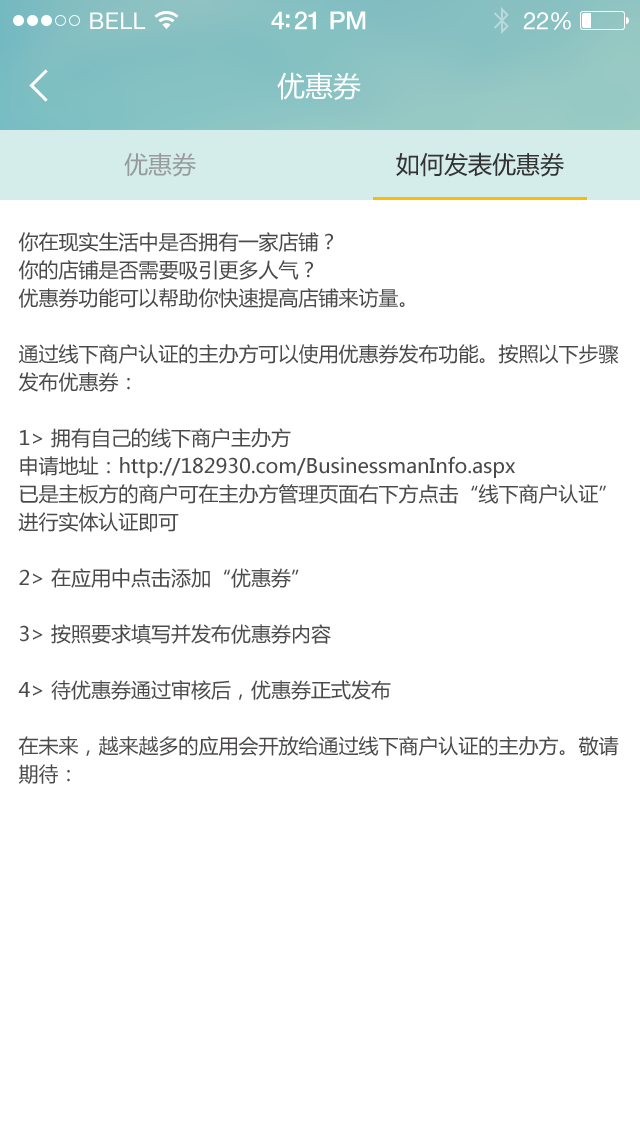
<style>
.page{position:relative;width:640px;height:1136px;background:#ffffff}
.page>*{position:absolute;margin:0}
.t1{font:23px "HelveticaNeue";letter-spacing:0.02em;color:#ffffff}
.t2{font:25px "HelveticaNeue-Medium";letter-spacing:-0.02em;color:#ffffff}
.t3{font:24px "HelveticaNeue";letter-spacing:-0.02em;color:#ffffff}
.t4{font:28px "MicrosoftYaHei";color:#ffffff}
.t5{font:24px "MicrosoftYaHei";color:#979b9d}
.t6{font:24px "MicrosoftYaHei";color:#333333}
.t7{font:20px/28px "MicrosoftYaHei";color:#4b4949}
</style>
<div class="page">
<p class="t1" style="left:90px;top:12px;width:56px;height:17px">BELL</p>
<p class="t2" style="left:271px;top:11px;width:95px;height:19px">4:21 PM</p>
<p class="t3" style="left:523px;top:12px;width:48px;height:18px">22%</p>
<p class="t4" style="left:277px;top:72px;width:84px;height:28px">优惠券</p>
<p class="t5" style="left:124px;top:153px;width:72px;height:24px">优惠券</p>
<p class="t6" style="left:396px;top:152px;width:168px;height:25px">如何发表优惠券</p>
<p class="t7" style="left:18px;top:232px;width:601px;height:552px">你在现实生活中是否拥有一家店铺？<br>你的店铺是否需要吸引更多人气？<br>优惠券功能可以帮助你快速提高店铺来访量。<br><br>通过线下商户认证的主办方可以使用优惠券发布功能。按照以下步骤发布优惠券：<br><br>1&gt; 拥有自己的线下商户主办方<br>申请地址：http://182930.com/BusinessmanInfo.aspx<br>已是主板方的商户可在主办方管理页面右下方点击“线下商户认证”进行实体认证即可<br><br>2&gt; 在应用中点击添加“优惠券”<br><br>3&gt; 按照要求填写并发布优惠券内容<br><br>4&gt; 待优惠券通过审核后，优惠券正式发布<br><br>在未来，越来越多的应用会开放给通过线下商户认证的主办方。敬请期待：</p>
</div>
